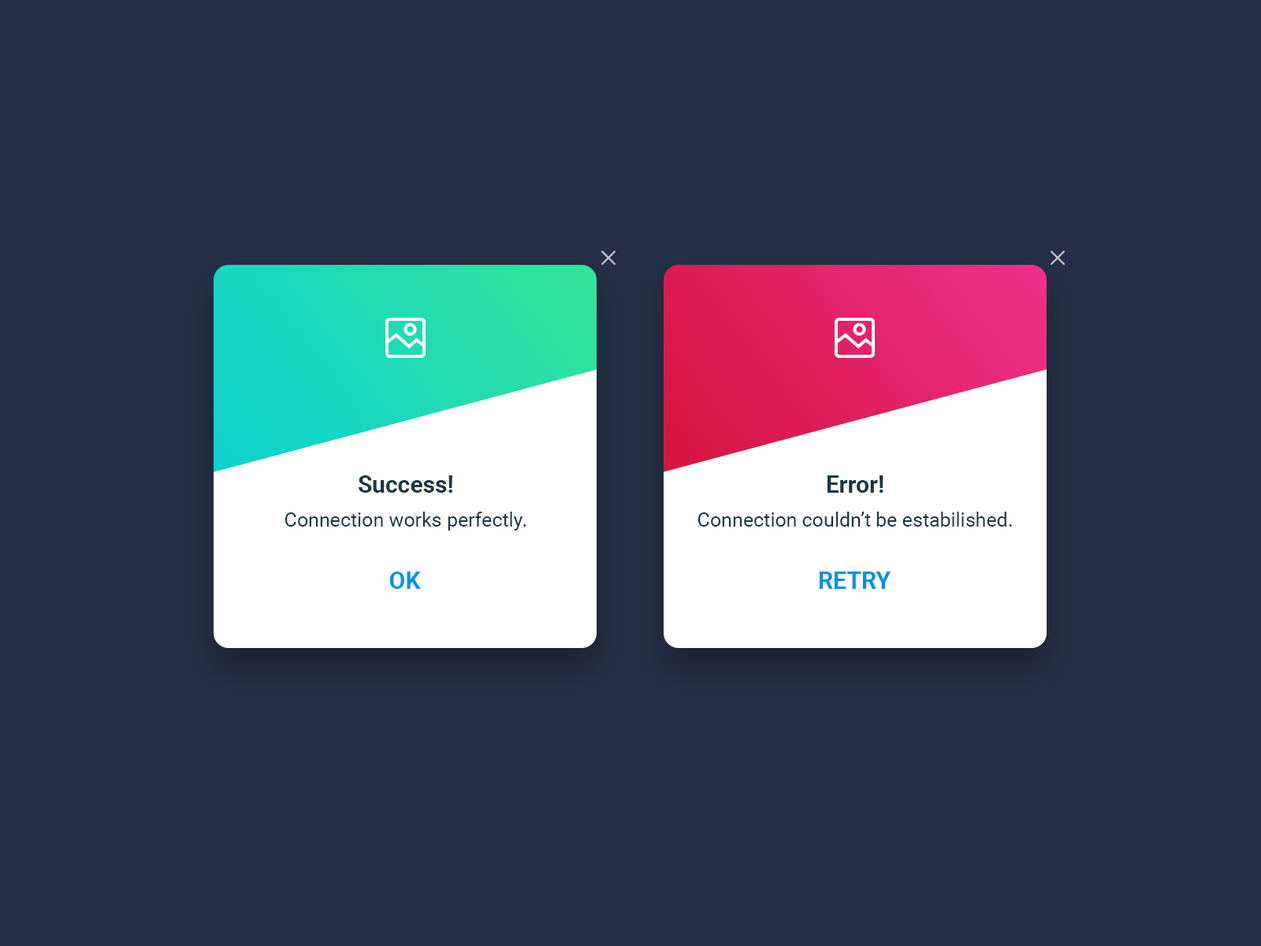
<style>
.page{position:relative;width:1261px;height:946px;background:#252f45}
.page>*{position:absolute;margin:0}
.t1{font:23.6px "Roboto-Bold";color:#1a3744}
.t2{font:19.7px "Roboto-Regular";color:#1a3744}
.t3{font:23.6px "Roboto-Bold";color:#0090ed;text-transform:uppercase}
</style>
<div class="page">
<p class="t1" style="left:359px;top:475px;width:93px;height:18px">Success!</p>
<p class="t1" style="left:827px;top:475px;width:56px;height:18px">Error!</p>
<p class="t2" style="left:285px;top:511px;width:241px;height:19px">Connection works perfectly.</p>
<p class="t2" style="left:698px;top:511px;width:314px;height:15px">Connection couldn’t be estabilished.</p>
<p class="t3" style="left:389px;top:571px;width:32px;height:18px">OK</p>
<p class="t3" style="left:819px;top:571px;width:72px;height:18px">Retry</p>
</div>
